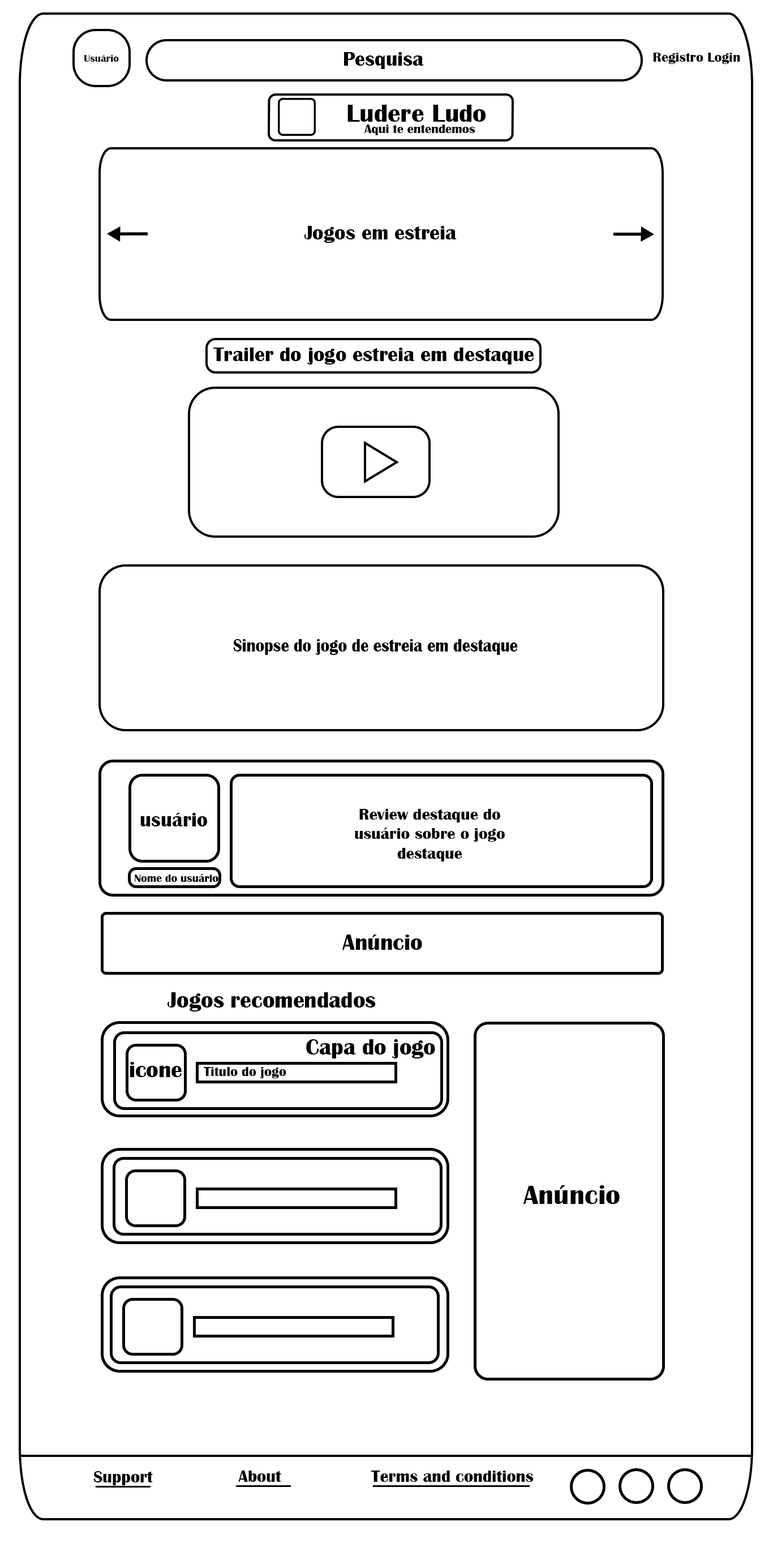
<style>
.page{position:relative;width:773px;height:1543px;background:#ffffff}
.page>*{position:absolute;margin:0}
.t1{font:20.3px "BritannicBold";color:#000000}
.t2{font:13.6px "BritannicBold";color:#000000}
.t3{font:10.2px "BritannicBold";color:#000000}
.t4{font:25.4px "BritannicBold";color:#000000}
.t5{font:12.7px "BritannicBold";color:#000000}
.t6{font:20.4px "BritannicBold";color:#000000}
.t7{font:18.6px "BritannicBold";color:#000000;scale:0.87 1}
.t8{font:16.4px "BritannicBold";color:#000000}
.t9{font:11px "BritannicBold";color:#000000}
.t10{font:22.4px "BritannicBold";color:#000000}
.t11{font:27.3px "BritannicBold";color:#000000}
.t12{font:17.1px "BritannicBold";color:#000000}
.t13{font:17px "BritannicBold";color:#000000}
</style>
<div class="page">
<p class="t1" style="left:344px;top:52px;width:80px;height:17px">Pesquisa</p>
<p class="t2" style="left:653px;top:53px;width:87px;height:11px">Registro Login</p>
<p class="t3" style="left:84px;top:55px;width:35px;height:7px">Usuário</p>
<p class="t4" style="left:347px;top:104px;width:139px;height:18px">Ludere Ludo</p>
<p class="t5" style="left:364px;top:124px;width:111px;height:11px">Aqui te entendemos</p>
<p class="t6" style="left:304px;top:226px;width:153px;height:17px">Jogos em estreia</p>
<p class="t6" style="left:213px;top:347px;width:321px;height:17px">Trailer do jogo estreia em destaque</p>
<p class="t7" style="left:233px;top:638px;width:285px;height:17px">Sinopse do jogo de estreia em destaque</p>
<p class="t8" style="left:355px;top:808px;width:150px;height:53px;text-align:center">Review destaque do usuário sobre o jogo destaque</p>
<p class="t6" style="left:140px;top:813px;width:67px;height:13px">usuário</p>
<p class="t9" style="left:135px;top:874px;width:83px;height:8px">Nome do usuário</p>
<p class="t10" style="left:342px;top:934px;width:80px;height:16px">Anúncio</p>
<p class="t10" style="left:167px;top:991px;width:209px;height:20px">Jogos recomendados</p>
<p class="t10" style="left:306px;top:1038px;width:129px;height:20px">Capa do jogo</p>
<p class="t10" style="left:130px;top:1062px;width:52px;height:15px">icone</p>
<p class="t2" style="left:203px;top:1066px;width:83px;height:12px">Titulo do jogo</p>
<p class="t11" style="left:523px;top:1185px;width:97px;height:19px">Anúncio</p>
<p class="t12" style="left:238px;top:1470px;width:43px;height:11px">About</p>
<p class="t12" style="left:371px;top:1470px;width:163px;height:11px">Terms and conditions</p>
<p class="t13" style="left:93px;top:1471px;width:60px;height:14px">Support</p>
</div>
